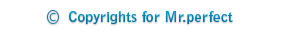
<style>
.page{position:relative;width:290px;height:33px;background:#ffffff}
.page>*{position:absolute;margin:0}
.t1{font:13.9px "BellGothicStd-Bold";color:#0082b5;scale:1.12 1}
</style>
<div class="page">
<p class="t1" style="left:69px;top:11px;width:164px;height:13px">Copyrights for Mr.perfect</p>
</div>
